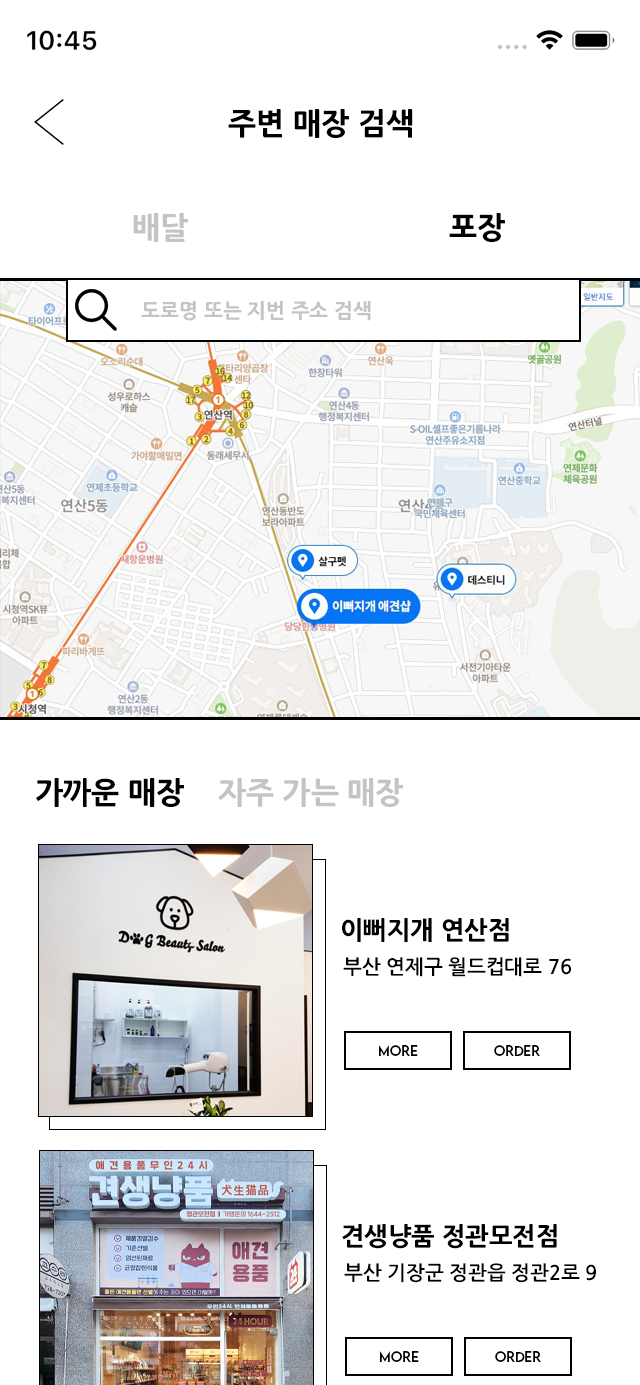
<style>
.page{position:relative;width:640px;height:1385px;background:#ffffff}
.page>*{position:absolute;margin:0}
.t1{font:30px "NanumGothicOTFExtraBold";color:#000000}
.t2{font:30px "NanumGothicOTFExtraBold";color:#c4c4c4}
.t3{font:20.1px "NanumGothicOTFExtraBold";color:#c4c4c4}
.t4{font:25px "NanumGothicOTFExtraBold";color:#000000}
.t5{font:20px "NanumGothicOTFBold";color:#000000}
.t6{font:13px "LEMONMILK-Regular";color:#000000}
</style>
<div class="page">
<p class="t1" style="left:228px;top:109px;width:185px;height:30px">주변 매장 검색</p>
<p class="t2" style="left:133px;top:213px;width:372px;height:30px">배달 <span class="t1">                              포장</span></p>
<p class="t3" style="left:141px;top:301px;width:230px;height:20px">도로명 또는 지번 주소 검색</p>
<p class="t2" style="left:36px;top:778px;width:367px;height:30px"><span class="t1">가까운 매장</span>    자주 가는 매장</p>
<p class="t4" style="left:342px;top:918px;width:167px;height:24px">이뻐지개 연산점</p>
<p class="t5" style="left:343px;top:957px;width:228px;height:20px">부산 연제구 월드컵대로 76</p>
<p class="t6" style="left:379px;top:1045px;width:39px;height:11px">MORE</p>
<p class="t6" style="left:494px;top:1045px;width:46px;height:11px">ORDER</p>
<p class="t4" style="left:342px;top:1224px;width:215px;height:25px">견생냥품 정관모전점</p>
<p class="t5" style="left:344px;top:1263px;width:252px;height:20px">부산 기장군 정관읍 정관2로 9</p>
<p class="t6" style="left:380px;top:1351px;width:39px;height:11px">MORE</p>
<p class="t6" style="left:495px;top:1351px;width:46px;height:11px">ORDER</p>
</div>
